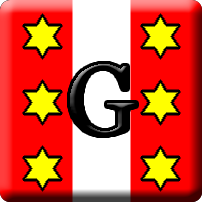
<style>
.page{position:relative;width:202px;height:202px;background:#ff0000}
.page>*{position:absolute;margin:0}
.t1{font:96px "Georgia";color:#000000}
</style>
<div class="page">
<p class="t1" style="left:70px;top:64px;width:66px;height:71px">G</p>
</div>
